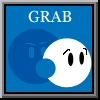
<style>
.page{position:relative;width:100px;height:100px;background:#0072bc}
.page>*{position:absolute;margin:0}
.t1{font:16px "Georgia";color:#ffffff}
</style>
<div class="page">
<p class="t1" style="left:28px;top:10px;width:44px;height:13px">GRAB</p>
</div>
